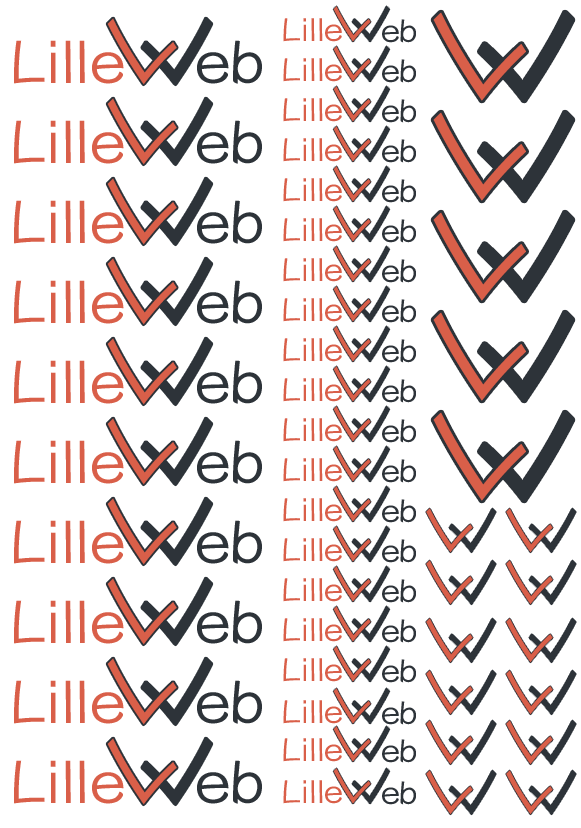
<style>
.page{position:relative;width:581px;height:828px;background:#ffffff}
.page>*{position:absolute;margin:0}
.t1{font:50.3px "YuppyTC-Regular";color:#d95f49;font-style:italic;scale:1.1 1}
.t2{font:50.3px "YuppyTC-Regular";color:#2d3339;font-style:italic;scale:1.1 1}
.t3{font:125.5px "YuppyTC-Regular";color:#d95f49;font-style:italic;scale:1.1 1}
.t4{font:125.5px "YuppyTC-Regular";color:#2d3339;font-style:italic;scale:1.1 1}
.t5{font:94px "YuppyTC-Regular";color:#d95f49;font-style:italic;scale:1.1 1}
.t6{font:94px "YuppyTC-Regular";color:#2d3339;font-style:italic;scale:1.1 1}
.t7{font:31.5px "YuppyTC-Regular";color:#d95f49;scale:1.1 1}
.t8{font:31.5px "YuppyTC-Regular";color:#2d3339;scale:1.1 1}
.t9{font:58.9px "YuppyTC-Regular";color:#d95f49;scale:1.1 1}
.t10{font:58.9px "YuppyTC-Regular";color:#2d3339;scale:1.1 1}
.t11{font:62.9px "YuppyTC-Regular";color:#d95f49;font-style:italic;scale:1.1 1}
.t12{font:62.9px "YuppyTC-Regular";color:#2d3339;font-style:italic;scale:1.1 1}
</style>
<div class="page">
<p class="t1" style="left:333px;top:6px;width:38px;height:36px;rotate:-45deg">L</p>
<p class="t2" style="left:352px;top:6px;width:38px;height:36px;rotate:-135deg">L</p>
<p class="t3" style="left:433px;top:12px;width:93px;height:89px;rotate:-45deg">L</p>
<p class="t4" style="left:480px;top:12px;width:93px;height:89px;rotate:-135deg">L</p>
<p class="t5" style="left:107px;top:18px;width:70px;height:67px;rotate:-45deg">L</p>
<p class="t6" style="left:142px;top:18px;width:70px;height:67px;rotate:-135deg">L</p>
<p class="t7" style="left:283px;top:18px;width:59px;height:24px">Lille</p>
<p class="t8" style="left:382px;top:19px;width:34px;height:24px">eb</p>
<p class="t9" style="left:14px;top:40px;width:110px;height:44px">Lille</p>
<p class="t10" style="left:197px;top:40px;width:65px;height:44px">eb</p>
<p class="t1" style="left:333px;top:46px;width:38px;height:36px;rotate:-45deg">L</p>
<p class="t2" style="left:352px;top:46px;width:38px;height:36px;rotate:-135deg">L</p>
<p class="t7" style="left:283px;top:58px;width:59px;height:24px">Lille</p>
<p class="t8" style="left:382px;top:59px;width:34px;height:24px">eb</p>
<p class="t1" style="left:333px;top:86px;width:38px;height:36px;rotate:-45deg">L</p>
<p class="t2" style="left:352px;top:86px;width:38px;height:36px;rotate:-135deg">L</p>
<p class="t5" style="left:107px;top:98px;width:70px;height:67px;rotate:-45deg">L</p>
<p class="t6" style="left:142px;top:98px;width:70px;height:67px;rotate:-135deg">L</p>
<p class="t7" style="left:283px;top:98px;width:59px;height:24px">Lille</p>
<p class="t8" style="left:382px;top:99px;width:34px;height:24px">eb</p>
<p class="t3" style="left:433px;top:112px;width:93px;height:89px;rotate:-45deg">L</p>
<p class="t4" style="left:480px;top:112px;width:93px;height:89px;rotate:-135deg">L</p>
<p class="t9" style="left:14px;top:120px;width:110px;height:44px">Lille</p>
<p class="t10" style="left:197px;top:120px;width:65px;height:44px">eb</p>
<p class="t1" style="left:333px;top:126px;width:38px;height:36px;rotate:-45deg">L</p>
<p class="t2" style="left:352px;top:126px;width:38px;height:36px;rotate:-135deg">L</p>
<p class="t7" style="left:283px;top:138px;width:59px;height:24px">Lille</p>
<p class="t8" style="left:382px;top:139px;width:34px;height:24px">eb</p>
<p class="t1" style="left:333px;top:166px;width:38px;height:36px;rotate:-45deg">L</p>
<p class="t2" style="left:352px;top:166px;width:38px;height:36px;rotate:-135deg">L</p>
<p class="t5" style="left:107px;top:178px;width:70px;height:67px;rotate:-45deg">L</p>
<p class="t6" style="left:142px;top:178px;width:70px;height:67px;rotate:-135deg">L</p>
<p class="t7" style="left:283px;top:178px;width:59px;height:24px">Lille</p>
<p class="t8" style="left:382px;top:179px;width:34px;height:24px">eb</p>
<p class="t9" style="left:14px;top:200px;width:110px;height:44px">Lille</p>
<p class="t10" style="left:197px;top:200px;width:65px;height:44px">eb</p>
<p class="t1" style="left:333px;top:206px;width:38px;height:36px;rotate:-45deg">L</p>
<p class="t2" style="left:352px;top:206px;width:38px;height:36px;rotate:-135deg">L</p>
<p class="t7" style="left:283px;top:218px;width:59px;height:24px">Lille</p>
<p class="t8" style="left:382px;top:219px;width:34px;height:24px">eb</p>
<p class="t3" style="left:433px;top:212px;width:93px;height:89px;rotate:-45deg">L</p>
<p class="t4" style="left:480px;top:212px;width:93px;height:89px;rotate:-135deg">L</p>
<p class="t1" style="left:333px;top:246px;width:38px;height:36px;rotate:-45deg">L</p>
<p class="t2" style="left:352px;top:246px;width:38px;height:36px;rotate:-135deg">L</p>
<p class="t5" style="left:107px;top:258px;width:70px;height:67px;rotate:-45deg">L</p>
<p class="t6" style="left:142px;top:258px;width:70px;height:67px;rotate:-135deg">L</p>
<p class="t7" style="left:283px;top:258px;width:59px;height:24px">Lille</p>
<p class="t8" style="left:382px;top:259px;width:34px;height:24px">eb</p>
<p class="t9" style="left:14px;top:280px;width:110px;height:44px">Lille</p>
<p class="t10" style="left:197px;top:280px;width:65px;height:44px">eb</p>
<p class="t1" style="left:333px;top:286px;width:38px;height:36px;rotate:-45deg">L</p>
<p class="t2" style="left:352px;top:286px;width:38px;height:36px;rotate:-135deg">L</p>
<p class="t7" style="left:283px;top:298px;width:59px;height:24px">Lille</p>
<p class="t8" style="left:382px;top:299px;width:34px;height:24px">eb</p>
<p class="t3" style="left:433px;top:312px;width:93px;height:89px;rotate:-45deg">L</p>
<p class="t4" style="left:480px;top:312px;width:93px;height:89px;rotate:-135deg">L</p>
<p class="t1" style="left:333px;top:326px;width:38px;height:36px;rotate:-45deg">L</p>
<p class="t2" style="left:352px;top:326px;width:38px;height:36px;rotate:-135deg">L</p>
<p class="t5" style="left:107px;top:338px;width:70px;height:67px;rotate:-45deg">L</p>
<p class="t6" style="left:142px;top:338px;width:70px;height:67px;rotate:-135deg">L</p>
<p class="t7" style="left:283px;top:338px;width:59px;height:24px">Lille</p>
<p class="t8" style="left:382px;top:339px;width:34px;height:24px">eb</p>
<p class="t9" style="left:14px;top:360px;width:110px;height:44px">Lille</p>
<p class="t10" style="left:197px;top:360px;width:65px;height:44px">eb</p>
<p class="t1" style="left:333px;top:366px;width:38px;height:36px;rotate:-45deg">L</p>
<p class="t2" style="left:352px;top:366px;width:38px;height:36px;rotate:-135deg">L</p>
<p class="t7" style="left:283px;top:378px;width:59px;height:24px">Lille</p>
<p class="t8" style="left:382px;top:379px;width:34px;height:24px">eb</p>
<p class="t1" style="left:333px;top:406px;width:38px;height:36px;rotate:-45deg">L</p>
<p class="t2" style="left:352px;top:406px;width:38px;height:36px;rotate:-135deg">L</p>
<p class="t3" style="left:433px;top:412px;width:93px;height:89px;rotate:-45deg">L</p>
<p class="t4" style="left:480px;top:412px;width:93px;height:89px;rotate:-135deg">L</p>
<p class="t5" style="left:107px;top:418px;width:70px;height:67px;rotate:-45deg">L</p>
<p class="t6" style="left:142px;top:418px;width:70px;height:67px;rotate:-135deg">L</p>
<p class="t7" style="left:283px;top:418px;width:59px;height:24px">Lille</p>
<p class="t8" style="left:382px;top:419px;width:34px;height:24px">eb</p>
<p class="t9" style="left:14px;top:440px;width:110px;height:44px">Lille</p>
<p class="t10" style="left:197px;top:440px;width:65px;height:44px">eb</p>
<p class="t1" style="left:333px;top:446px;width:38px;height:36px;rotate:-45deg">L</p>
<p class="t2" style="left:352px;top:446px;width:38px;height:36px;rotate:-135deg">L</p>
<p class="t7" style="left:283px;top:458px;width:59px;height:24px">Lille</p>
<p class="t8" style="left:382px;top:459px;width:34px;height:24px">eb</p>
<p class="t1" style="left:333px;top:486px;width:38px;height:36px;rotate:-45deg">L</p>
<p class="t2" style="left:352px;top:486px;width:38px;height:36px;rotate:-135deg">L</p>
<p class="t5" style="left:107px;top:498px;width:70px;height:67px;rotate:-45deg">L</p>
<p class="t6" style="left:142px;top:498px;width:70px;height:67px;rotate:-135deg">L</p>
<p class="t7" style="left:283px;top:498px;width:59px;height:24px">Lille</p>
<p class="t8" style="left:382px;top:499px;width:34px;height:24px">eb</p>
<p class="t11" style="left:426px;top:508px;width:47px;height:45px;rotate:-45deg">L</p>
<p class="t12" style="left:449px;top:508px;width:47px;height:45px;rotate:-135deg">L</p>
<p class="t11" style="left:506px;top:508px;width:47px;height:45px;rotate:-45deg">L</p>
<p class="t12" style="left:529px;top:508px;width:47px;height:45px;rotate:-135deg">L</p>
<p class="t9" style="left:14px;top:520px;width:110px;height:44px">Lille</p>
<p class="t10" style="left:197px;top:520px;width:65px;height:44px">eb</p>
<p class="t1" style="left:333px;top:526px;width:38px;height:36px;rotate:-45deg">L</p>
<p class="t2" style="left:352px;top:526px;width:38px;height:36px;rotate:-135deg">L</p>
<p class="t7" style="left:283px;top:538px;width:59px;height:24px">Lille</p>
<p class="t8" style="left:382px;top:539px;width:34px;height:24px">eb</p>
<p class="t1" style="left:333px;top:566px;width:38px;height:36px;rotate:-45deg">L</p>
<p class="t2" style="left:352px;top:566px;width:38px;height:36px;rotate:-135deg">L</p>
<p class="t11" style="left:426px;top:560px;width:47px;height:45px;rotate:-45deg">L</p>
<p class="t12" style="left:449px;top:560px;width:47px;height:45px;rotate:-135deg">L</p>
<p class="t11" style="left:506px;top:560px;width:47px;height:45px;rotate:-45deg">L</p>
<p class="t12" style="left:529px;top:560px;width:47px;height:45px;rotate:-135deg">L</p>
<p class="t5" style="left:107px;top:578px;width:70px;height:67px;rotate:-45deg">L</p>
<p class="t6" style="left:142px;top:578px;width:70px;height:67px;rotate:-135deg">L</p>
<p class="t7" style="left:283px;top:578px;width:59px;height:24px">Lille</p>
<p class="t8" style="left:382px;top:579px;width:34px;height:24px">eb</p>
<p class="t9" style="left:14px;top:600px;width:110px;height:44px">Lille</p>
<p class="t10" style="left:197px;top:600px;width:65px;height:44px">eb</p>
<p class="t1" style="left:333px;top:606px;width:38px;height:36px;rotate:-45deg">L</p>
<p class="t2" style="left:352px;top:606px;width:38px;height:36px;rotate:-135deg">L</p>
<p class="t7" style="left:283px;top:618px;width:59px;height:24px">Lille</p>
<p class="t8" style="left:382px;top:619px;width:34px;height:24px">eb</p>
<p class="t11" style="left:426px;top:618px;width:47px;height:45px;rotate:-45deg">L</p>
<p class="t12" style="left:449px;top:618px;width:47px;height:45px;rotate:-135deg">L</p>
<p class="t11" style="left:506px;top:618px;width:47px;height:45px;rotate:-45deg">L</p>
<p class="t12" style="left:529px;top:618px;width:47px;height:45px;rotate:-135deg">L</p>
<p class="t1" style="left:333px;top:646px;width:38px;height:36px;rotate:-45deg">L</p>
<p class="t2" style="left:352px;top:646px;width:38px;height:36px;rotate:-135deg">L</p>
<p class="t5" style="left:107px;top:658px;width:70px;height:67px;rotate:-45deg">L</p>
<p class="t6" style="left:142px;top:658px;width:70px;height:67px;rotate:-135deg">L</p>
<p class="t7" style="left:283px;top:658px;width:59px;height:24px">Lille</p>
<p class="t8" style="left:382px;top:659px;width:34px;height:24px">eb</p>
<p class="t11" style="left:426px;top:670px;width:47px;height:45px;rotate:-45deg">L</p>
<p class="t12" style="left:449px;top:670px;width:47px;height:45px;rotate:-135deg">L</p>
<p class="t11" style="left:506px;top:670px;width:47px;height:45px;rotate:-45deg">L</p>
<p class="t12" style="left:529px;top:670px;width:47px;height:45px;rotate:-135deg">L</p>
<p class="t9" style="left:14px;top:680px;width:110px;height:44px">Lille</p>
<p class="t10" style="left:197px;top:680px;width:65px;height:44px">eb</p>
<p class="t1" style="left:333px;top:688px;width:38px;height:36px;rotate:-45deg">L</p>
<p class="t2" style="left:352px;top:688px;width:38px;height:36px;rotate:-135deg">L</p>
<p class="t7" style="left:283px;top:700px;width:59px;height:24px">Lille</p>
<p class="t8" style="left:382px;top:701px;width:34px;height:24px">eb</p>
<p class="t1" style="left:333px;top:726px;width:38px;height:36px;rotate:-45deg">L</p>
<p class="t2" style="left:352px;top:726px;width:38px;height:36px;rotate:-135deg">L</p>
<p class="t11" style="left:426px;top:720px;width:47px;height:45px;rotate:-45deg">L</p>
<p class="t12" style="left:449px;top:720px;width:47px;height:45px;rotate:-135deg">L</p>
<p class="t11" style="left:506px;top:720px;width:47px;height:45px;rotate:-45deg">L</p>
<p class="t12" style="left:529px;top:720px;width:47px;height:45px;rotate:-135deg">L</p>
<p class="t5" style="left:107px;top:738px;width:70px;height:67px;rotate:-45deg">L</p>
<p class="t6" style="left:142px;top:738px;width:70px;height:67px;rotate:-135deg">L</p>
<p class="t7" style="left:283px;top:738px;width:59px;height:24px">Lille</p>
<p class="t8" style="left:382px;top:739px;width:34px;height:24px">eb</p>
<p class="t9" style="left:14px;top:760px;width:110px;height:44px">Lille</p>
<p class="t10" style="left:197px;top:760px;width:65px;height:44px">eb</p>
<p class="t1" style="left:333px;top:768px;width:38px;height:36px;rotate:-45deg">L</p>
<p class="t2" style="left:352px;top:768px;width:38px;height:36px;rotate:-135deg">L</p>
<p class="t11" style="left:426px;top:770px;width:47px;height:45px;rotate:-45deg">L</p>
<p class="t12" style="left:449px;top:770px;width:47px;height:45px;rotate:-135deg">L</p>
<p class="t11" style="left:506px;top:770px;width:47px;height:45px;rotate:-45deg">L</p>
<p class="t12" style="left:529px;top:770px;width:47px;height:45px;rotate:-135deg">L</p>
<p class="t7" style="left:283px;top:780px;width:59px;height:24px">Lille</p>
<p class="t8" style="left:382px;top:781px;width:34px;height:24px">eb</p>
</div>
